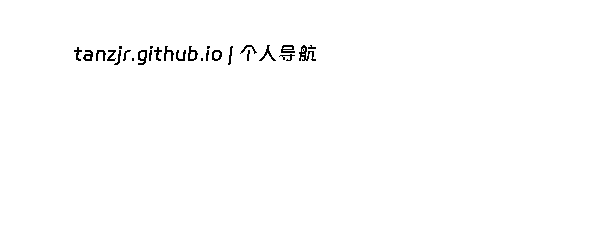
<style>
.page{position:relative;width:600px;height:243px;background:#ffffff}
.page>*{position:absolute;margin:0}
.t1{font:18.9px "DingTalk-JinBuTi";letter-spacing:0.04em;color:#000000}
</style>
<div class="page">
<p class="t1" style="left:74px;top:45px;width:242px;height:20px">tanzjr.github.io | 个人导航</p>
</div>
